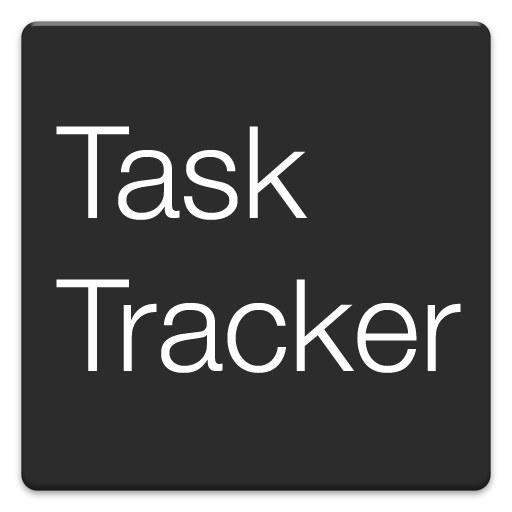
<style>
.page{position:relative;width:512px;height:512px;background:#2c2c2c}
.page>*{position:absolute;margin:0}
.t1{font:128px "HelveticaNeue-Light";color:#ffffff}
.t2{font:60px "HelveticaNeue-Light";color:#ffffff}
</style>
<div class="page">
<p class="t1" style="left:56px;top:126px;width:405px;height:247px"><span class="t2"><br></span> Task<br> Tracker</p>
</div>
